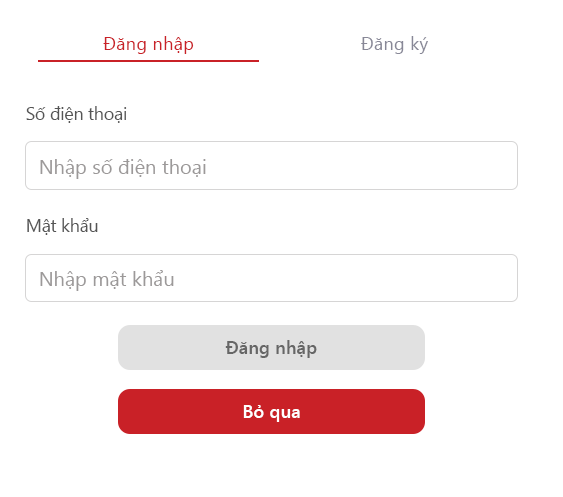
<style>
.page{position:relative;width:563px;height:497px;background:#ffffff}
.page>*{position:absolute;margin:0}
.t1{font:18.3px "SegoeUI";letter-spacing:0.01em;color:#c92127}
.t2{font:18.3px "SegoeUI";letter-spacing:0.01em;color:#888897}
.t3{font:18.3px "SegoeUI";letter-spacing:-0.023em;color:#555555}
.t4{font:20px "SegoeUI";color:#9c9999}
.t5{font:18.3px "SegoeUI-Semibold";color:#666666}
.t6{font:18.3px "SegoeUI-Semibold";color:#ffffff}
</style>
<div class="page">
<p class="t1" style="left:103px;top:36px;width:91px;height:18px">Đăng nhập</p>
<p class="t2" style="left:361px;top:36px;width:67px;height:18px">Đăng ký</p>
<p class="t3" style="left:26px;top:106px;width:101px;height:17px">Số điện thoại</p>
<p class="t4" style="left:40px;top:159px;width:166px;height:20px">Nhập số điện thoại</p>
<p class="t3" style="left:27px;top:218px;width:71px;height:17px">Mật khẩu</p>
<p class="t4" style="left:40px;top:270px;width:134px;height:21px">Nhập mật khẩu</p>
<p class="t5" style="left:225px;top:340px;width:92px;height:18px">Đăng nhập</p>
<p class="t6" style="left:243px;top:405px;width:57px;height:17px">Bỏ qua</p>
</div>
